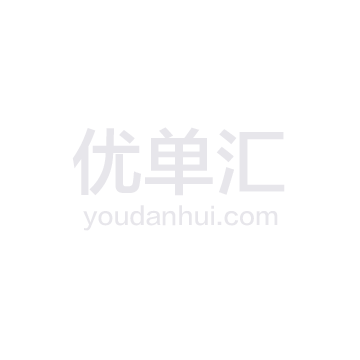
<style>
.page{position:relative;width:360px;height:360px;background:#ffffff}
.page>*{position:absolute;margin:0}
.t1{font:72px "FZLTZHK--GBK1-0";color:#e7e6eb}
.t2{font:24px "FZLTZHK--GBK1-0";color:#e7e6eb}
</style>
<div class="page">
<p class="t1" style="left:72px;top:127px;width:213px;height:69px">优单汇</p>
<p class="t2" style="left:83px;top:205px;width:195px;height:26px">youdanhui.com</p>
</div>
